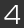
<style>
.page{position:relative;width:24px;height:28px;background:#333333}
.page>*{position:absolute;margin:0}
.t1{font:27.3px "NexaLight";color:#ffffff}
</style>
<div class="page">
<p class="t1" style="left:4px;top:5px;width:17px;height:19px">4</p>
</div>
